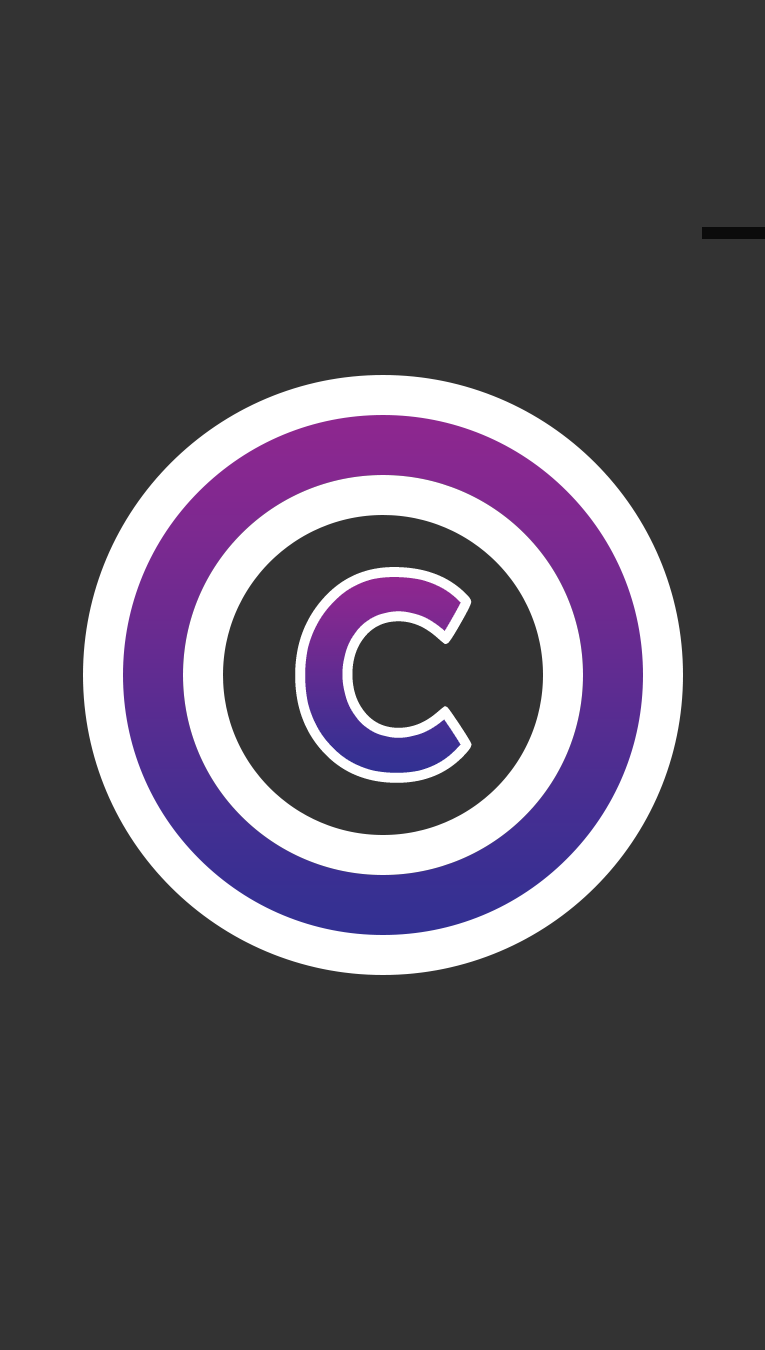
<style>
.page{position:relative;width:765px;height:1350px;background:#333333}
.page>*{position:absolute;margin:0}
.t1{font:300px "BerlinSansFBDemi-Bold";letter-spacing:0.2em}
</style>
<div class="page">
<p class="t1" style="left:295px;top:567px;width:177px;height:216px">C</p>
</div>
